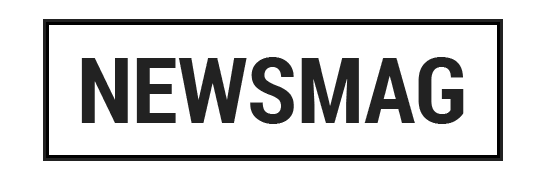
<style>
.page{position:relative;width:544px;height:180px;background:#ffffff}
.page>*{position:absolute;margin:0}
.t1{font:92px "RobotoCondensed-Bold";color:#222222}
</style>
<div class="page">
<p class="t1" style="left:81px;top:57px;width:383px;height:67px">NEWSMAG</p>
</div>
